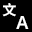
<style>
.page{position:relative;width:32px;height:32px;background:#000000}
.page>*{position:absolute;margin:0}
.t1{font:14px "SourceHanSansCN-Bold";color:#ffffff}
.t2{font:18px "NotoSans-SemiBold";color:#ffffff}
</style>
<div class="page">
<p class="t1" style="left:2px;top:3px;width:14px;height:14px">文</p>
<p class="t2" style="left:16px;top:16px;width:13px;height:13px">A</p>
</div>
